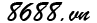
<style>
.page{position:relative;width:97px;height:23px;background:#ffffff}
.page>*{position:absolute;margin:0}
.t1{font:30px "BrushScriptMT";color:#000000}
</style>
<div class="page">
<p class="t1" style="left:7px;top:2px;width:83px;height:19px">8688.vn</p>
</div>
